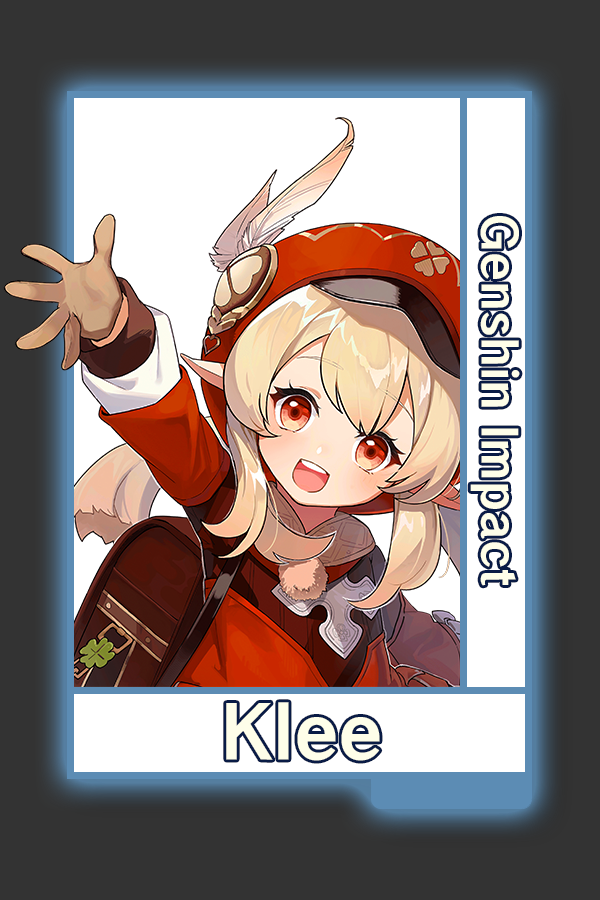
<style>
.page{position:relative;width:600px;height:900px;background:#333333}
.page>*{position:absolute;margin:0}
.t1{font:48.8px "HYWenHei-HEW";color:#fefef4}
.t2{font:75px "HYWenHei-HEW";color:#fefef4}
</style>
<div class="page">
<p class="t1" style="left:470px;top:216px;width:50px;height:370px;rotate:90deg">Genshin Impact</p>
<p class="t2" style="left:226px;top:702px;width:154px;height:59px">Klee</p>
</div>
